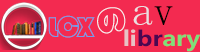
<style>
.page{position:relative;width:200px;height:52px;background:#f32a50}
.page>*{position:absolute;margin:0}
.t1{font:42.1px "YouYuan";color:#eadee1}
.t2{font:42.1px "YouYuan";color:#030302}
.t3{font:28.1px "STCaiyun";color:#6aa0f0}
.t4{font:29.8px "STCaiyun";color:#f6edf0}
.t5{font:20.8px "MicrosoftYaHei-Bold";color:#7fdf7a;scale:1.14 1}
.t6{font:20.8px "MicrosoftYaHei-Bold";color:#e8c1c5;scale:1.14 1}
.t7{font:20.8px "MicrosoftYaHei-Bold";color:#4b0851;scale:1.14 1}
</style>
<div class="page">
<p class="t1" style="left:133px;top:6px;width:40px;height:19px">a<span class="t2">v</span></p>
<p class="t3" style="left:48px;top:15px;width:47px;height:23px">LCX</p>
<p class="t4" style="left:97px;top:7px;width:29px;height:27px;rotate:-15deg">の</p>
<p class="t5" style="left:124px;top:29px;width:76px;height:23px"><span class="t6">li</span><span class="t7">br</span>ary</p>
</div>
